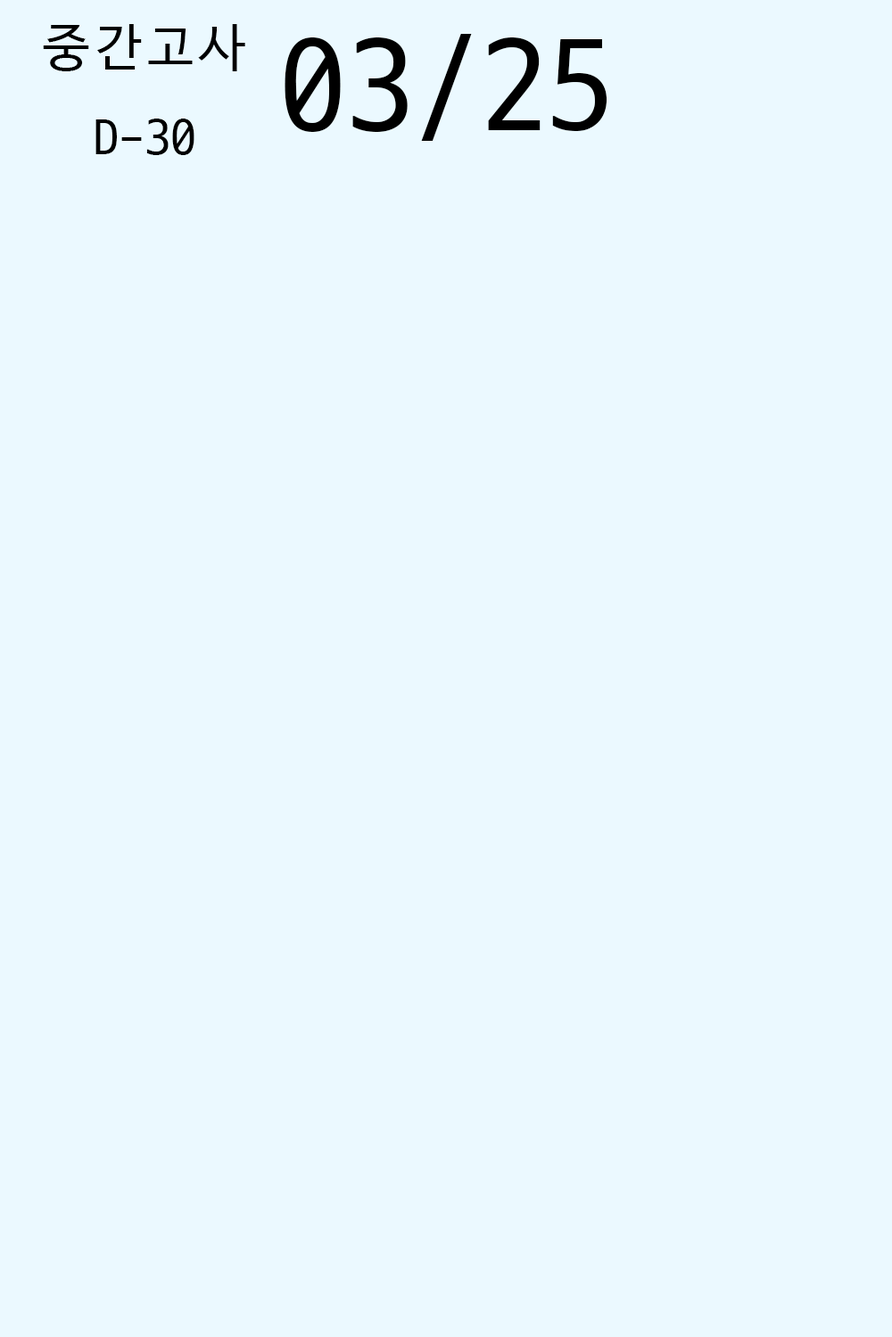
<style>
.page{position:relative;width:892px;height:1337px;background:#ebf9ff}
.page>*{position:absolute;margin:0}
.t1{font:52px "D2Codingligature";color:#000000}
.t2{font:133.7px "D2Codingligature";color:#000000}
</style>
<div class="page">
<p class="t1" style="left:43px;top:24px;width:202px;height:131px;text-align:center">중간고사<br>D-30</p>
<p class="t2" style="left:284px;top:34px;width:323px;height:107px">03/25</p>
</div>
